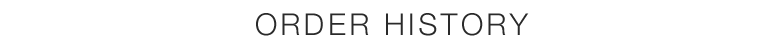
<style>
.page{position:relative;width:784px;height:47px;background:#ffffff}
.page>*{position:absolute;margin:0}
.t1{font:30px "HelveticaNeue-Light";letter-spacing:0.11em;color:#2a2a2a}
</style>
<div class="page">
<p class="t1" style="left:256px;top:13px;width:273px;height:23px">ORDER HISTORY</p>
</div>
